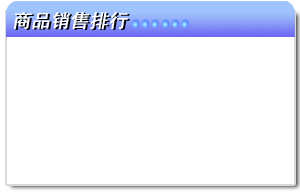
<style>
.page{position:relative;width:300px;height:193px;background:#ffffff}
.page>*{position:absolute;margin:0}
.t1{font:18.7px "SimHei";color:#ffffff;font-weight:bold;font-style:italic}
</style>
<div class="page">
<p class="t1" style="left:13px;top:11px;width:115px;height:19px">商品销售排行</p>
</div>
